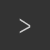
<style>
.page{position:relative;width:50px;height:50px;background:#333333}
.page>*{position:absolute;margin:0}
.t1{font:30px "MetaSerifPro-Light";letter-spacing:0.02em;color:#cccccc}
</style>
<div class="page">
<p class="t1" style="left:19px;top:18px;width:12px;height:16px">&gt;</p>
</div>
